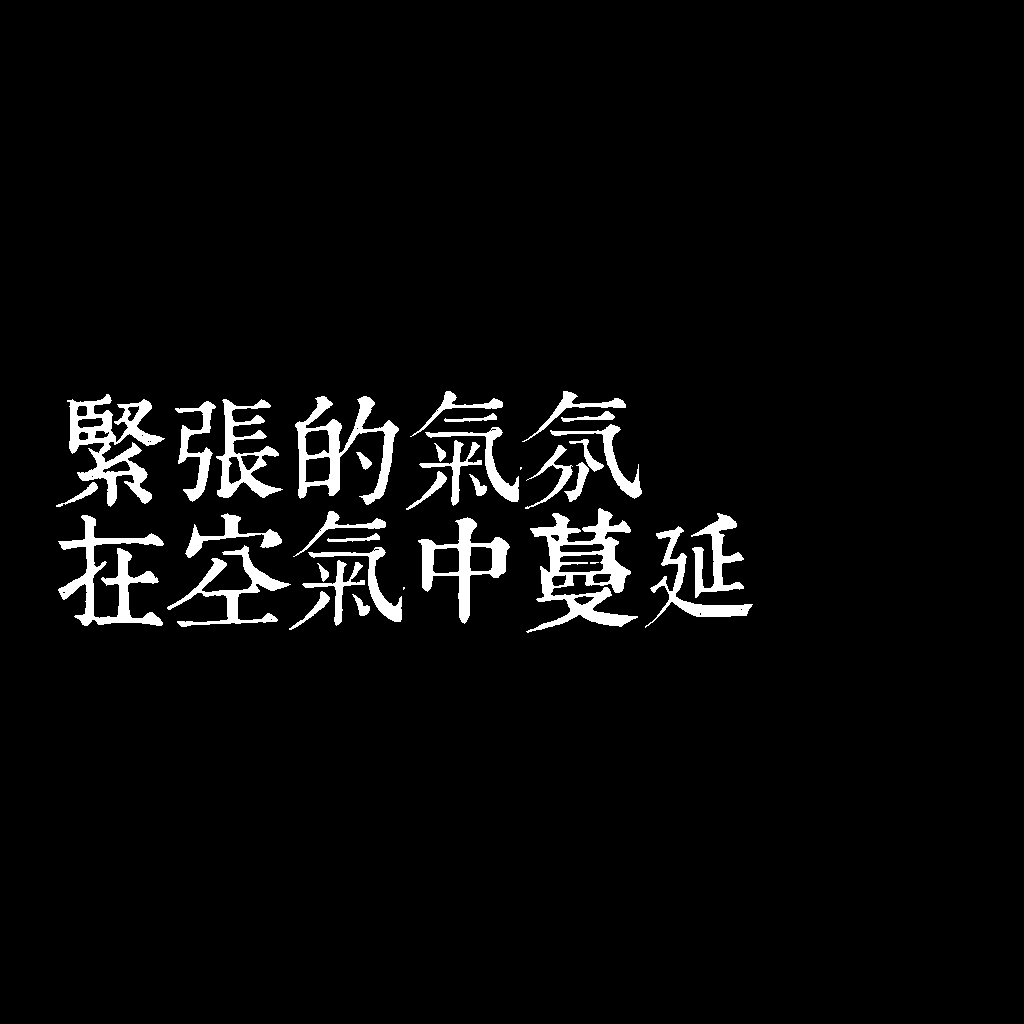
<style>
.page{position:relative;width:1024px;height:1024px;background:#000000}
.page>*{position:absolute;margin:0}
.t1{font:120px/120px "TpldKhangXiDictTrial";letter-spacing:-0.02em;color:#ffffff}
</style>
<div class="page">
<p class="t1" style="left:56px;top:391px;width:697px;height:242px">緊張的氣氛<br>在空氣中蔓延</p>
</div>
